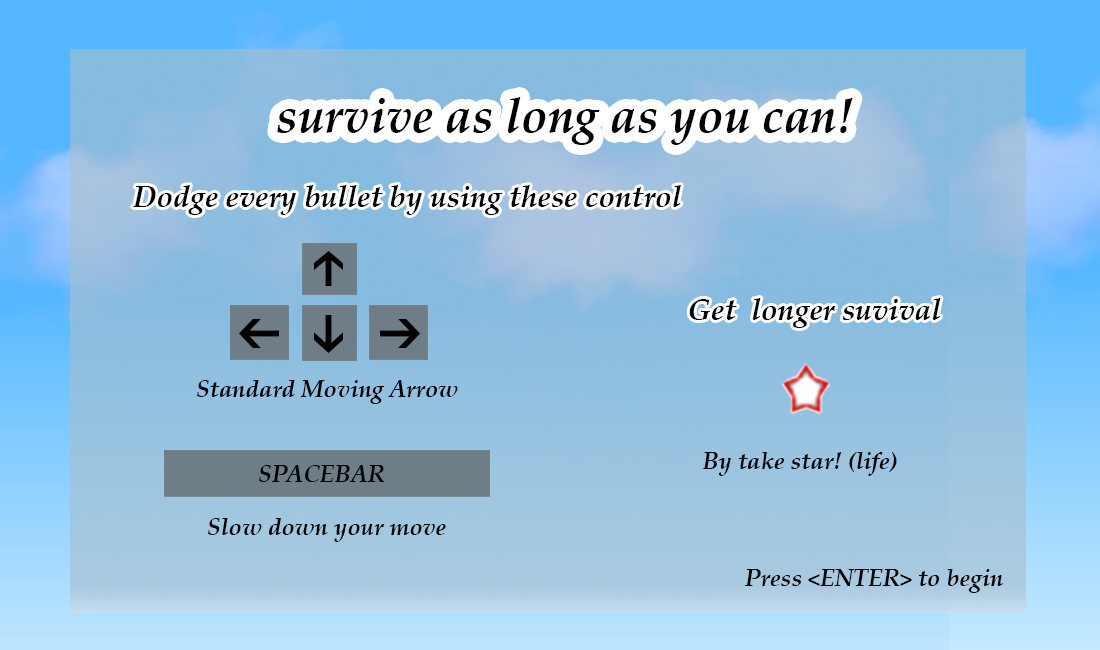
<style>
.page{position:relative;width:1100px;height:650px}
.page>*{position:absolute;margin:0}
.t1{font:48px "PalatinoLinotype-BoldItalic";color:#000000}
.t2{font:30px "PalatinoLinotype-BoldItalic";color:#000000}
.t3{font:24px "PalatinoLinotype-BoldItalic";color:#000000}
</style>
<div class="page">
<p class="t1" style="left:277px;top:97px;width:576px;height:48px">survive as long as you can!</p>
<p class="t2" style="left:133px;top:185px;width:548px;height:30px">Dodge every bullet by using these control</p>
<p class="t2" style="left:689px;top:298px;width:252px;height:30px">Get  longer suvival</p>
<p class="t3" style="left:197px;top:380px;width:261px;height:24px">Standard Moving Arrow</p>
<p class="t3" style="left:703px;top:452px;width:194px;height:24px">By take star! (life)</p>
<p class="t3" style="left:259px;top:465px;width:126px;height:17px">SPACEBAR</p>
<p class="t3" style="left:208px;top:518px;width:238px;height:24px">Slow down your move</p>
<p class="t3" style="left:745px;top:569px;width:258px;height:24px">Press &lt;ENTER&gt; to begin</p>
</div>
